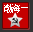
<style>
.page{position:relative;width:33px;height:32px;background:#c50000}
.page>*{position:absolute;margin:0}
.t1{font:10.4px "SimSun";letter-spacing:-0.25em;color:#ffffff}
</style>
<div class="page">
<p class="t1" style="left:4px;top:4px;width:24px;height:9px">渤海一</p>
</div>
